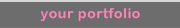
<style>
.page{position:relative;width:180px;height:28px;background:#6d6d6d}
.page>*{position:absolute;margin:0}
.t1{font:14px "ArialRoundedMTBold";letter-spacing:0.045em;color:#ff84b4}
</style>
<div class="page">
<p class="t1" style="left:40px;top:8px;width:100px;height:13px">your portfolio</p>
</div>
